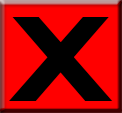
<style>
.page{position:relative;width:122px;height:113px;background:#ff0000}
.page>*{position:absolute;margin:0}
.t1{font:117.4px "Arial-BoldMT";color:#000000;scale:1.32 1}
</style>
<div class="page">
<p class="t1" style="left:8px;top:17px;width:105px;height:84px">X</p>
</div>
